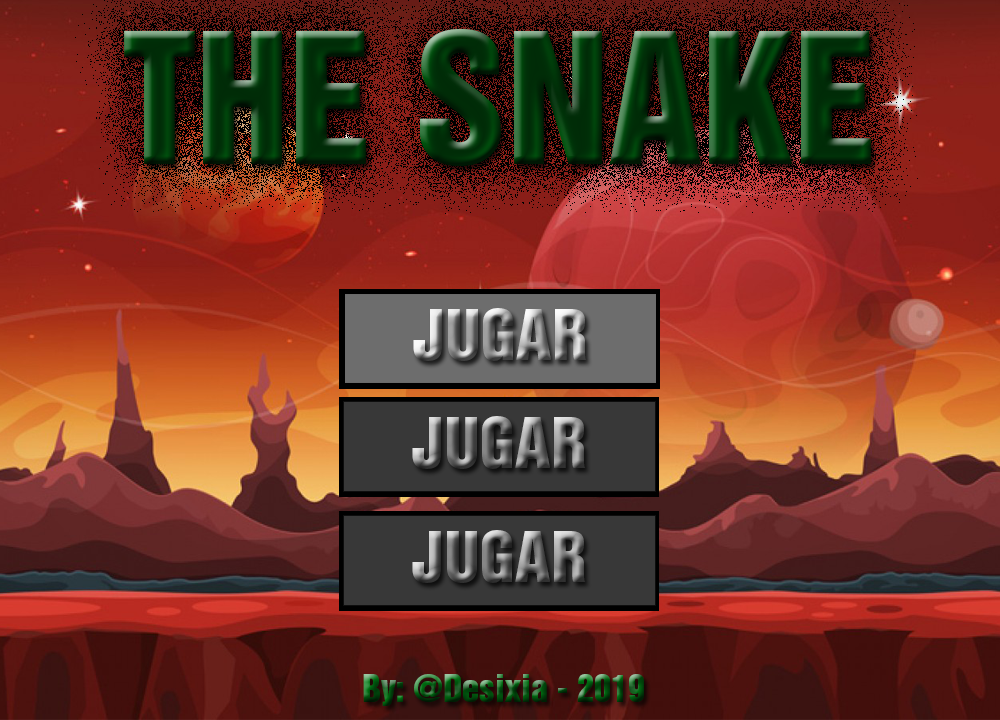
<style>
.page{position:relative;width:1000px;height:720px}
.page>*{position:absolute;margin:0}
.t1{font:166.8px "HelveticaInseratLTStd-Roman"}
.t2{font:34.3px "HelveticaInseratLTStd-Roman"}
</style>
<div class="page">
<p class="t1" style="left:124px;top:28px;width:747px;height:138px">THE SNAKE</p>
<p class="t2" style="left:363px;top:674px;width:281px;height:32px">By: @Desixia - 2019</p>
</div>
